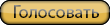
<style>
.page{position:relative;width:110px;height:25px;background:#ebca7c}
.page>*{position:absolute;margin:0}
.t1{font:18px "MyriadPro-Regular"}
</style>
<div class="page">
<p class="t1" style="left:14px;top:5px;width:85px;height:13px">Голосовать</p>
</div>
